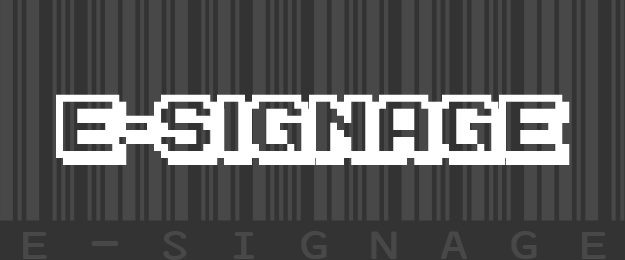
<style>
.page{position:relative;width:625px;height:260px;background:#333333}
.page>*{position:absolute;margin:0}
.t1{font:72px "KarmaticArcade";color:#ffffff}
</style>
<div class="page">
<p class="t1" style="left:56px;top:94px;width:514px;height:71px">E-Signage</p>
</div>
